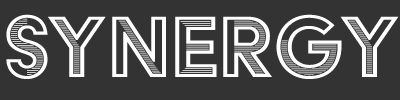
<style>
.page{position:relative;width:400px;height:100px;background:#333333}
.page>*{position:absolute;margin:0}
.t1{font:100px "AcierBATText-Gris";color:#ffffff}
</style>
<div class="page">
<p class="t1" style="left:6px;top:14px;width:393px;height:65px">Synergy</p>
</div>
